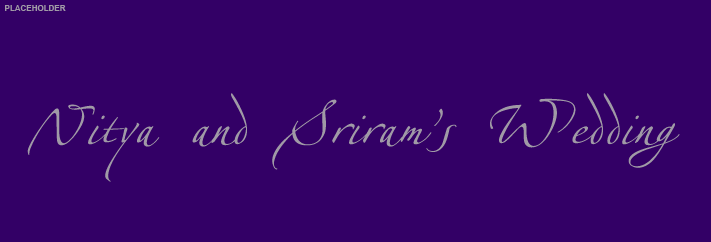
<style>
.page{position:relative;width:711px;height:242px;background:#330066}
.page>*{position:absolute;margin:0}
.t1{font:8px "Arial-BoldMT";color:#a09aa6}
.t2{font:72px "ZapfinoLinotypeTwo";color:#a09aa6}
</style>
<div class="page">
<p class="t1" style="left:5px;top:5px;width:61px;height:6px">PLACEHOLDER</p>
<p class="t2" style="left:27px;top:93px;width:653px;height:89px">Nitya and Sriram’s Wedding</p>
</div>
